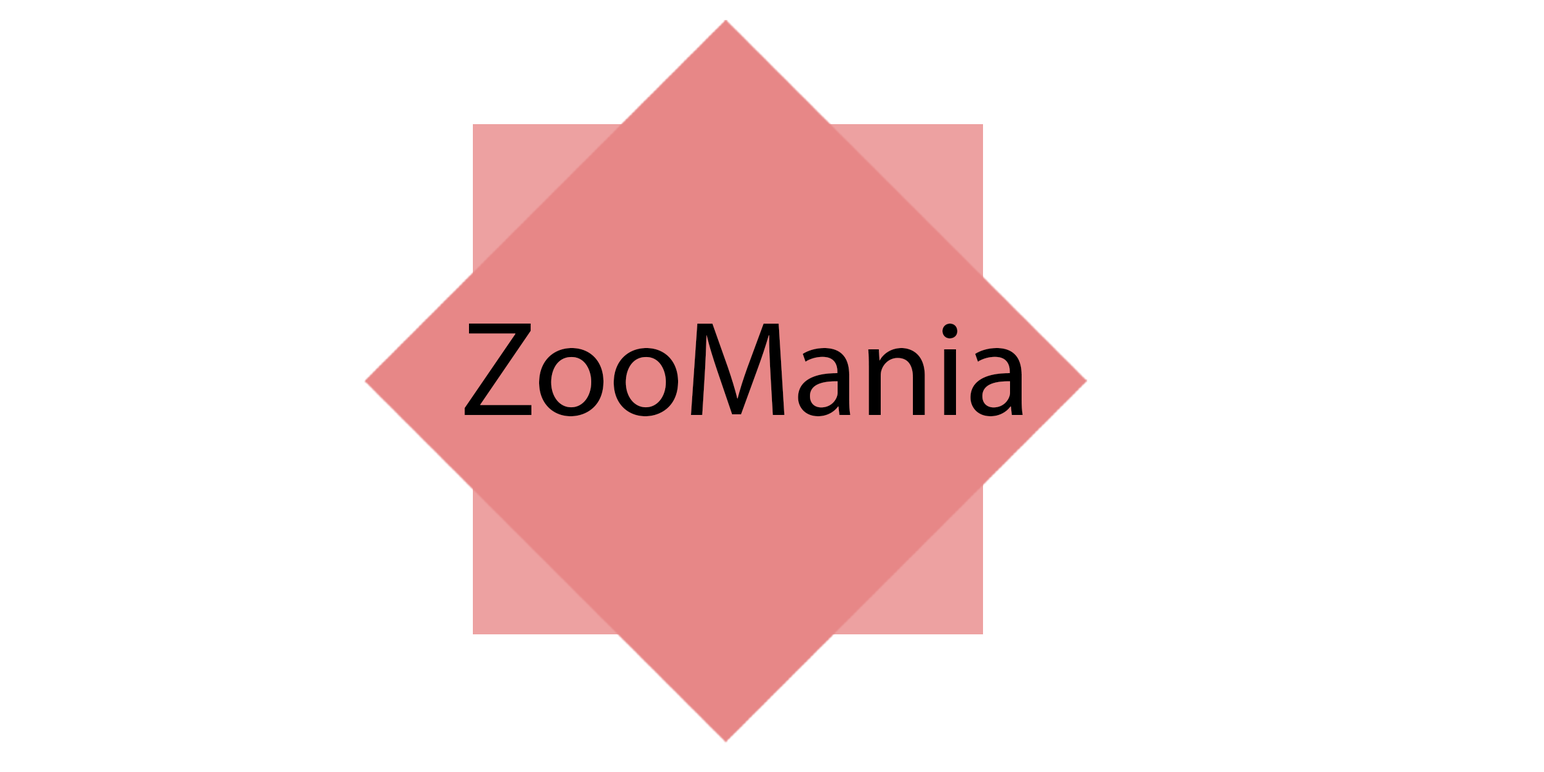
<style>
.page{position:relative;width:1544px;height:772px;background:#ffffff}
.page>*{position:absolute;margin:0}
.t1{font:135.8px "MyriadPro-Regular";color:#000000}
</style>
<div class="page">
<p class="t1" style="left:465px;top:323px;width:558px;height:93px">ZooMania</p>
</div>
